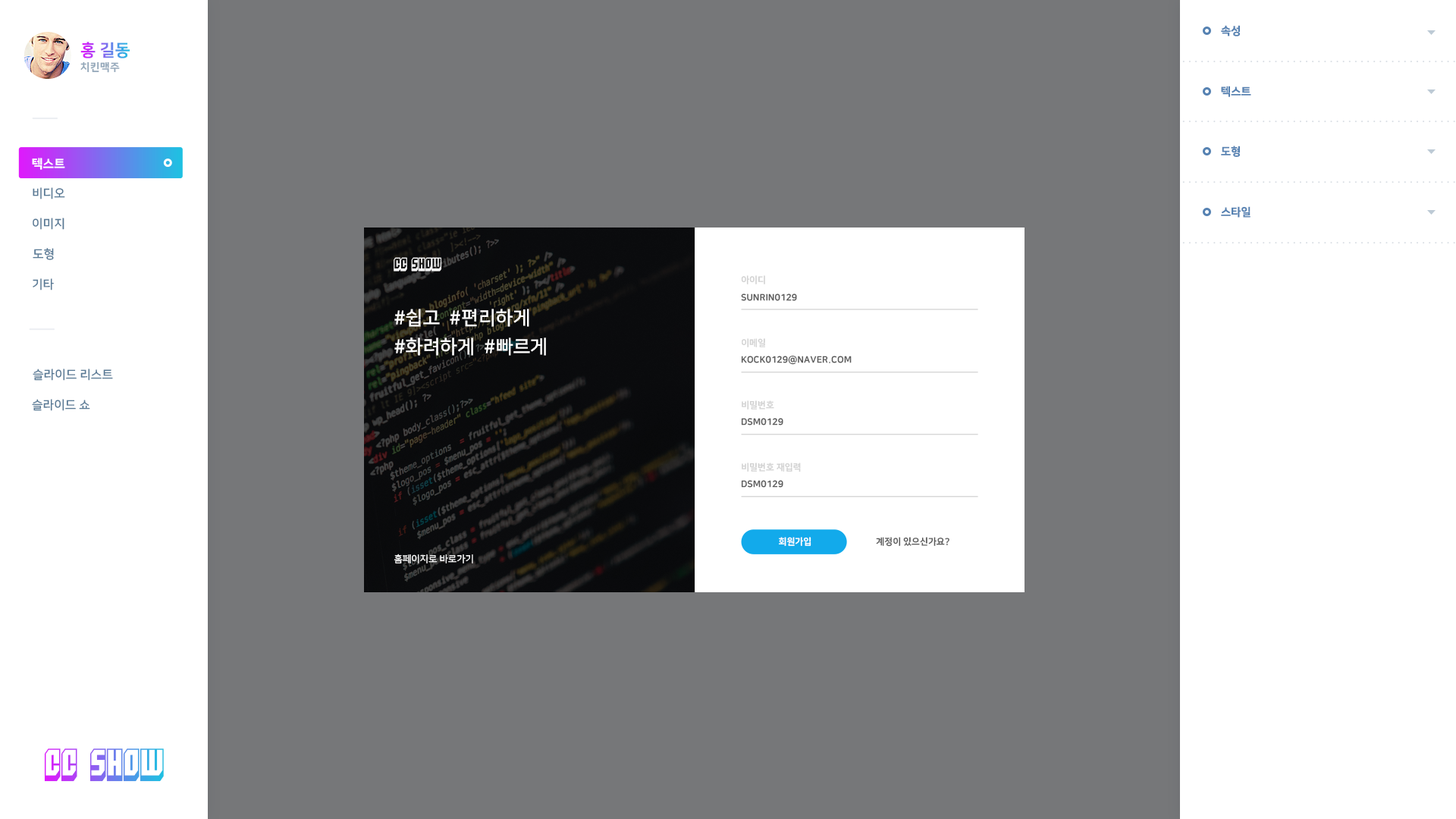
<style>
.page{position:relative;width:1456px;height:819px;background:#767779}
.page>*{position:absolute;margin:0}
.t1{font:11.1px "NanumSquareEB";color:#5682b2}
.t2{font:16.7px "NanumSquareEB";text-transform:uppercase}
.t3{font:10.6px "NanumSquareEB";letter-spacing:0.025em;color:#94a8ba;text-transform:uppercase}
.t4{font:12.1px "NanumSquareEB";color:#ffffff;text-transform:uppercase}
.t5{font:12.1px "NanumSquareB";color:#597a96;text-transform:uppercase}
.t6{font:12.6px "Blockt";color:#ffffff;text-transform:uppercase}
.t7{font:9.1px "NanumSquareEB";color:#d2d2d2;text-transform:uppercase}
.t8{font:9.1px "NanumSquareEB";color:#5b5b5b;text-transform:uppercase}
.t9{font:19px/28.4px "NanumSquareB";color:#ffffff;text-transform:uppercase}
.t10{font:9.1px "NanumSquareEB";color:#ffffff;text-transform:uppercase}
.t11{font:9.5px "NanumSquareR";color:#ffffff;text-transform:uppercase}
.t12{font:31.6px "Blockt"}
</style>
<div class="page">
<p class="t1" style="left:1221px;top:25px;width:19px;height:11px">속성</p>
<p class="t2" style="left:80px;top:42px;width:50px;height:16px">홍 길동</p>
<p class="t3" style="left:80px;top:61px;width:40px;height:12px">치킨맥주</p>
<p class="t1" style="left:1221px;top:86px;width:30px;height:11px">텍스트</p>
<p class="t1" style="left:1221px;top:146px;width:19px;height:11px">도형</p>
<p class="t4" style="left:32px;top:158px;width:33px;height:12px">텍스트</p>
<p class="t5" style="left:33px;top:187px;width:32px;height:12px">비디오</p>
<p class="t1" style="left:1221px;top:206px;width:29px;height:12px">스타일</p>
<p class="t5" style="left:33px;top:218px;width:31px;height:12px">이미지</p>
<p class="t5" style="left:33px;top:248px;width:21px;height:12px">도형</p>
<p class="t6" style="left:394px;top:257px;width:47px;height:14px">CC Show</p>
<p class="t5" style="left:33px;top:278px;width:21px;height:12px">기타</p>
<p class="t7" style="left:741px;top:275px;width:24px;height:9px">아이디</p>
<p class="t8" style="left:741px;top:293px;width:56px;height:8px">sunrin0129</p>
<p class="t9" style="left:394px;top:309px;width:152px;height:47px">#쉽고  #편리하게<br>#화려하게  #빠르게</p>
<p class="t7" style="left:742px;top:338px;width:23px;height:9px">이메일</p>
<p class="t8" style="left:741px;top:355px;width:111px;height:10px">kock0129@naver.com</p>
<p class="t5" style="left:33px;top:369px;width:80px;height:12px">슬라이드 리스트</p>
<p class="t5" style="left:32px;top:399px;width:58px;height:12px">슬라이드 쇼</p>
<p class="t7" style="left:742px;top:400px;width:32px;height:9px">비밀번호</p>
<p class="t8" style="left:741px;top:418px;width:42px;height:7px">dsm0129</p>
<p class="t7" style="left:742px;top:463px;width:59px;height:9px">비밀번호 재입력</p>
<p class="t8" style="left:741px;top:480px;width:42px;height:8px">dsm0129</p>
<p class="t10" style="left:779px;top:537px;width:32px;height:9px">회원가입</p>
<p class="t8" style="left:876px;top:537px;width:73px;height:10px">계정이 있으신가요?</p>
<p class="t11" style="left:394px;top:554px;width:79px;height:9px">홈페이지로 바로가기</p>
<p class="t12" style="left:44px;top:748px;width:120px;height:34px">CC SHOW</p>
</div>
